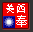
<style>
.page{position:relative;width:33px;height:32px;background:#f20000}
.page>*{position:absolute;margin:0}
.t1{font:10.4px "SimSun";color:#ffffff}
.t2{font:11.7px "SimSun";color:#ffffff}
</style>
<div class="page">
<p class="t1" style="left:6px;top:4px;width:19px;height:9px">美西</p>
<p class="t2" style="left:16px;top:15px;width:11px;height:12px">奉</p>
</div>
